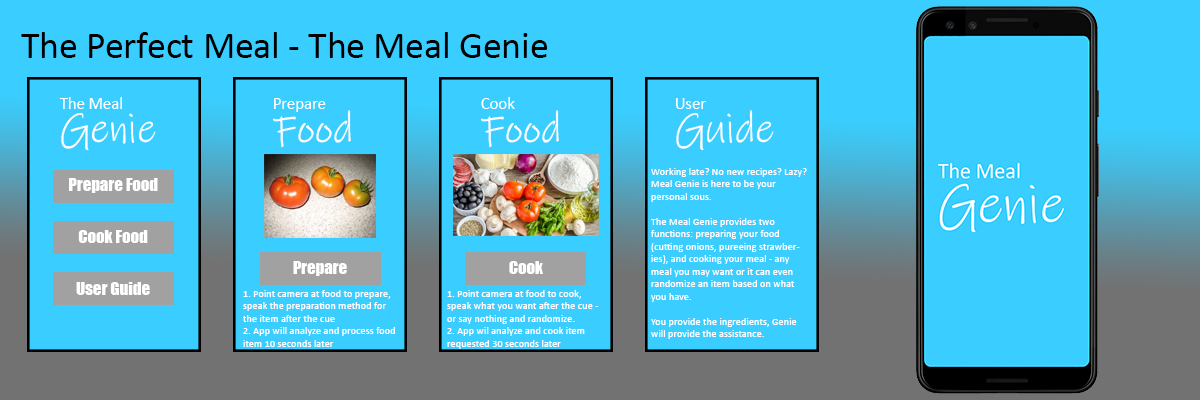
<style>
.page{position:relative;width:1200px;height:400px;background:#39ceff}
.page>*{position:absolute;margin:0}
.t1{font:37.5px "Calibri";color:#000000}
.t2{font:16.7px/33.3px "Calibri";color:#ffffff}
.t3{font:41.7px/33.3px "InkFree";color:#ffffff}
.t4{font:10.4px/12.5px "Calibri";color:#ffffff}
.t5{font:16.7px "Impact";color:#ffffff}
</style>
<div class="page">
<p class="t1" style="left:21px;top:32px;width:527px;height:26px">The Perfect Meal - The Meal Genie</p>
<p class="t2" style="left:59px;top:97px;width:97px;height:53px">The Meal<br><span class="t3">Genie</span></p>
<p class="t2" style="left:273px;top:98px;width:78px;height:50px">Prepare<br><span class="t3">Food</span></p>
<p class="t2" style="left:481px;top:97px;width:78px;height:51px">Cook<br><span class="t3">Food</span></p>
<p class="t3" style="left:676px;top:98px;width:98px;height:52px"><span class="t2">User<br></span>Guide</p>
<p class="t4" style="left:651px;top:168px;width:156px;height:171px">Working late? No new recipes? Lazy? <br>Meal Genie is here to be your personal sous. <br><br>The Meal Genie provides two functions: preparing your food (cutting onions, pureeing strawberies), and cooking your meal - any meal you may want or it can even randomize an item based on what you have.<br><br>You provide the ingredients, Genie will provide the assistance.</p>
<p class="t5" style="left:69px;top:178px;width:89px;height:15px">Prepare Food</p>
<p class="t5" style="left:78px;top:230px;width:70px;height:13px">Cook Food</p>
<p class="t5" style="left:293px;top:261px;width:54px;height:15px">Prepare</p>
<p class="t5" style="left:509px;top:261px;width:34px;height:13px">Cook</p>
<p class="t5" style="left:76px;top:282px;width:74px;height:13px">User Guide</p>
<p class="t4" style="left:243px;top:290px;width:152px;height:57px">1. Point camera at food to prepare, speak the preparation method for the item after the cue<br>2. App will analyze and process food item 10 seconds later</p>
<p class="t4" style="left:447px;top:290px;width:152px;height:59px">1. Point camera at food to cook, speak what you want after the cue - or say nothing and randomize.<br>2. App wil analyze and cook item requested 30 seconds later</p>
</div>
